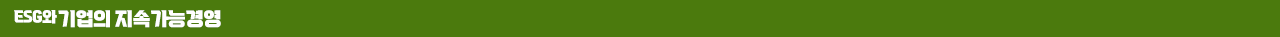
<style>
.page{position:relative;width:1280px;height:37px;background:#4b7a0d}
.page>*{position:absolute;margin:0}
.t1{font:14.6px "VITRO-CORE-TTF";letter-spacing:-0.025em;color:#ffffff}
.t2{font:18.5px "VITRO-CORE-TTF";letter-spacing:-0.025em;color:#ffffff}
</style>
<div class="page">
<p class="t1" style="left:14px;top:10px;width:43px;height:14px">ESG와</p>
<p class="t2" style="left:58px;top:10px;width:163px;height:18px">기업의 지속가능경영</p>
</div>
